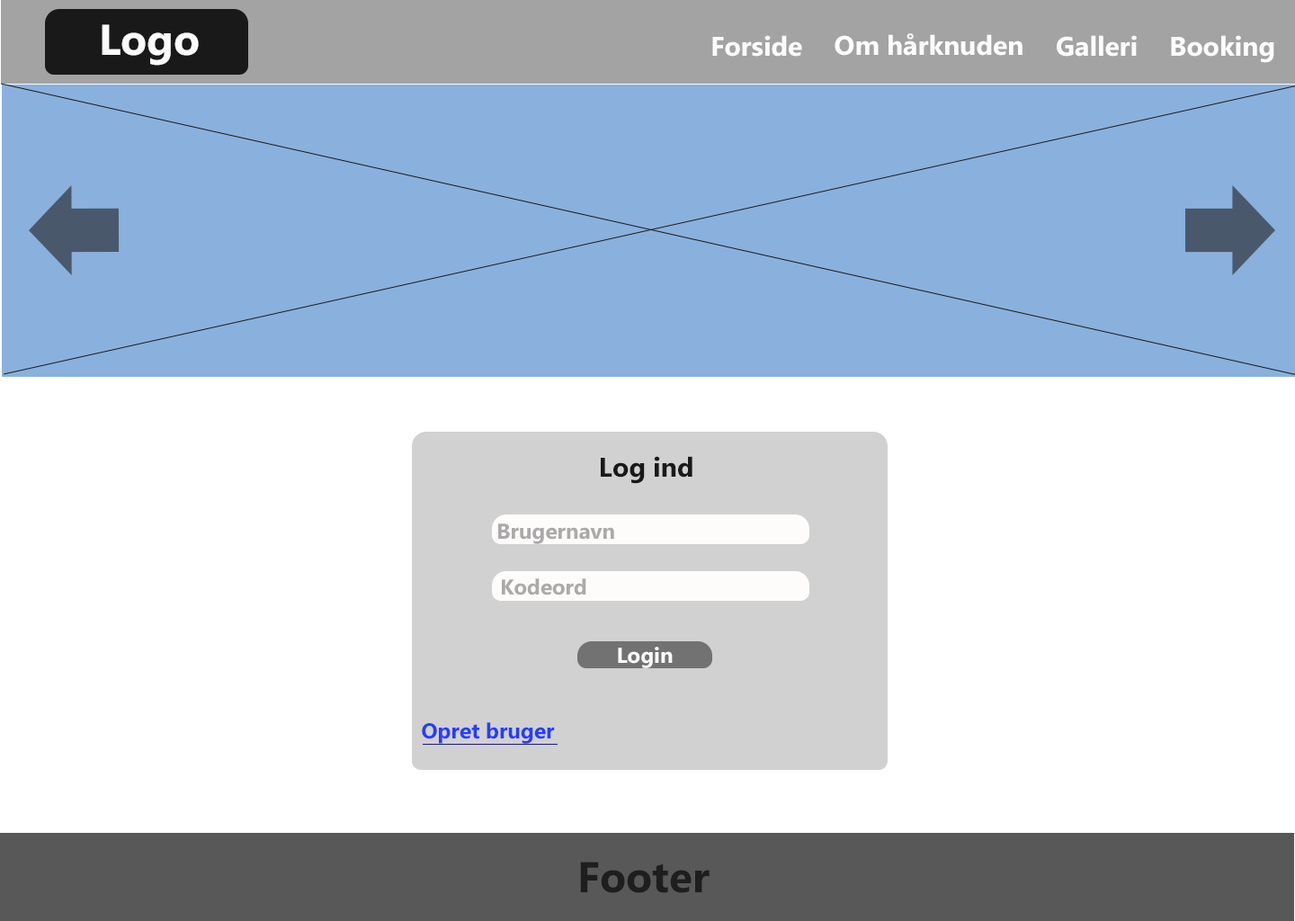
<style>
.page{position:relative;width:1295px;height:921px;background:#ffffff}
.page>*{position:absolute;margin:0}
.t1{font:43.2px "Ebrima-Bold";color:#fdfcfc}
.t2{font:27px "Ebrima-Bold";color:#fdfcfc}
.t3{font:27px "Ebrima-Bold";color:#191919}
.t4{font:21.6px "Ebrima-Bold";color:#aba9a9}
.t5{font:21.6px "Ebrima-Bold";color:#fcfcfc}
.t6{font:21.6px "Ebrima-Bold";color:#0c28fc}
.t7{font:43.2px "Ebrima-Bold";color:#1e1e1e}
</style>
<div class="page">
<p class="t1" style="left:102px;top:24px;width:97px;height:42px">Logo</p>
<p class="t2" style="left:712px;top:35px;width:90px;height:22px">Forside</p>
<p class="t2" style="left:835px;top:33px;width:187px;height:23px">Om hårknuden</p>
<p class="t2" style="left:1057px;top:35px;width:80px;height:22px">Galleri</p>
<p class="t2" style="left:1171px;top:35px;width:103px;height:28px">Booking</p>
<p class="t3" style="left:601px;top:456px;width:91px;height:28px">Log ind</p>
<p class="t4" style="left:498px;top:523px;width:116px;height:21px">Brugernavn</p>
<p class="t4" style="left:502px;top:578px;width:84px;height:17px">Kodeord</p>
<p class="t5" style="left:618px;top:647px;width:55px;height:21px">Login</p>
<p class="t6" style="left:422px;top:722px;width:133px;height:22px">Opret bruger</p>
<p class="t7" style="left:580px;top:861px;width:130px;height:32px">Footer</p>
</div>
